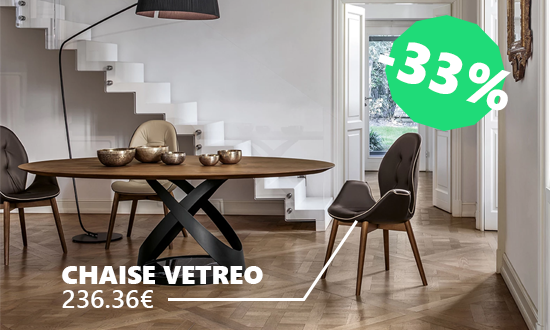
<style>
.page{position:relative;width:550px;height:330px}
.page>*{position:absolute;margin:0}
.t1{font:57px "SegoeUIBlack";color:#ffffff;text-transform:uppercase}
.t2{font:25.8px/24px "SegoeUIBlack";color:#ffffff;text-transform:uppercase}
.t3{font:25.8px/24px "SegoeUI-Semibold";color:#ffffff;text-transform:uppercase}
</style>
<div class="page">
<p class="t1" style="left:378px;top:42px;width:133px;height:69px;rotate:17deg">-33%</p>
<p class="t2" style="left:62px;top:266px;width:201px;height:42px">Chaise Vetreo<br><span class="t3">236.36€</span></p>
</div>
